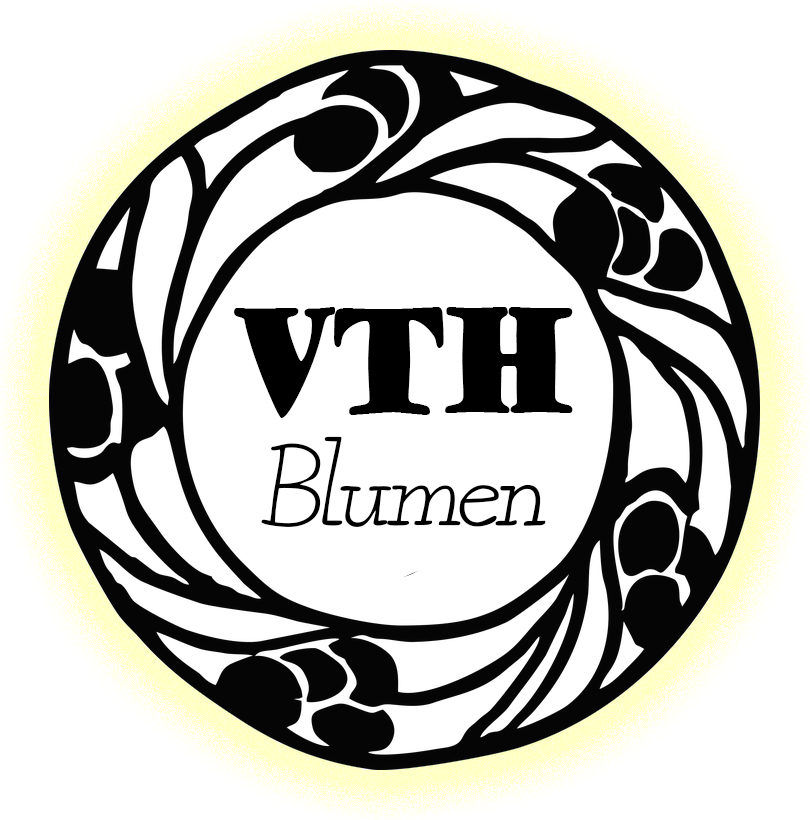
<style>
.page{position:relative;width:810px;height:820px;background:#ffffff}
.page>*{position:absolute;margin:0}
.t1{font:140.8px "GoudyStout";color:#000000;scale:0.68 1}
.t2{font:120px "iCielGrandma";color:#000000;font-style:italic}
</style>
<div class="page">
<p class="t1" style="left:234px;top:307px;width:339px;height:111px">VTH</p>
<p class="t2" style="left:261px;top:436px;width:285px;height:91px">Blumen</p>
</div>
